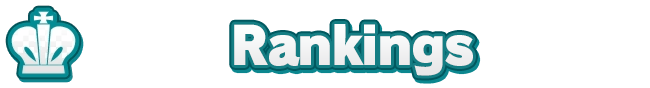
<style>
.page{position:relative;width:650px;height:88px;background:#ffffff}
.page>*{position:absolute;margin:0}
.t1{font:52px "RodinPro-UB";letter-spacing:-0.041em;color:#f2f3f3}
</style>
<div class="page">
<p class="t1" style="left:234px;top:24px;width:239px;height:52px">Rankings</p>
</div>
